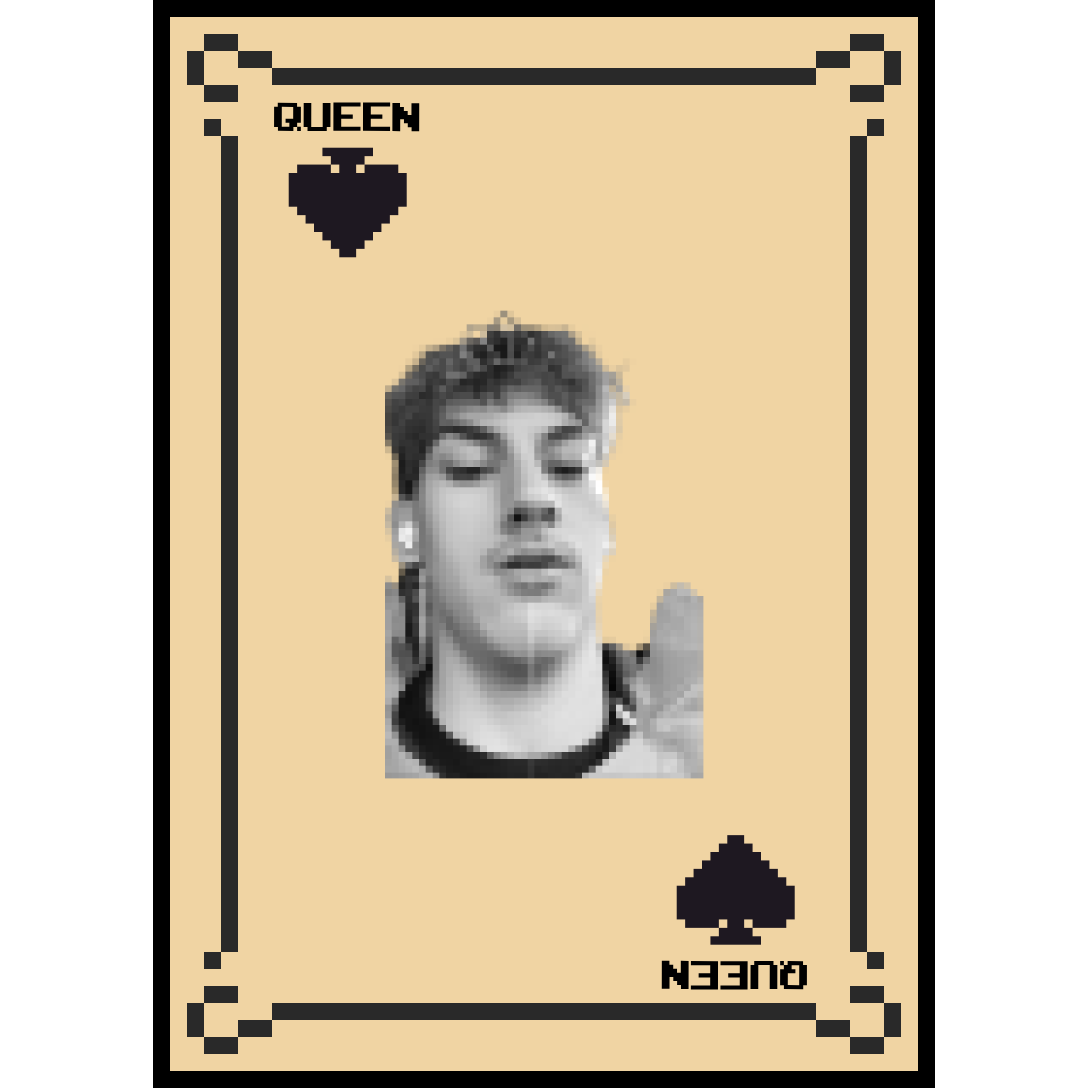
<style>
.page{position:relative;width:1088px;height:1088px;background:#f0d4a3}
.page>*{position:absolute;margin:0}
.t1{font:56.2px "ArcadeClassic";color:#000000;scale:0.96 1}
</style>
<div class="page">
<p class="t1" style="left:274px;top:102px;width:146px;height:30px">QUEEN</p>
<p class="t1" style="left:661px;top:960px;width:146px;height:30px;rotate:-180deg">QUEEN</p>
</div>
